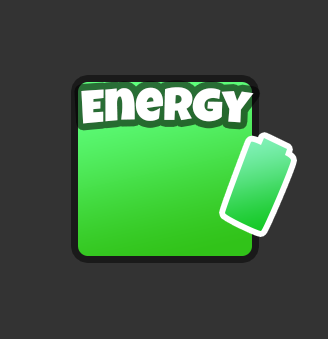
<style>
.page{position:relative;width:328px;height:339px;background:#333333}
.page>*{position:absolute;margin:0}
.t1{font:46px "LuckiestGuy-Regular";color:#ffffff}
</style>
<div class="page">
<p class="t1" style="left:81px;top:87px;width:173px;height:37px">Energy</p>
</div>
